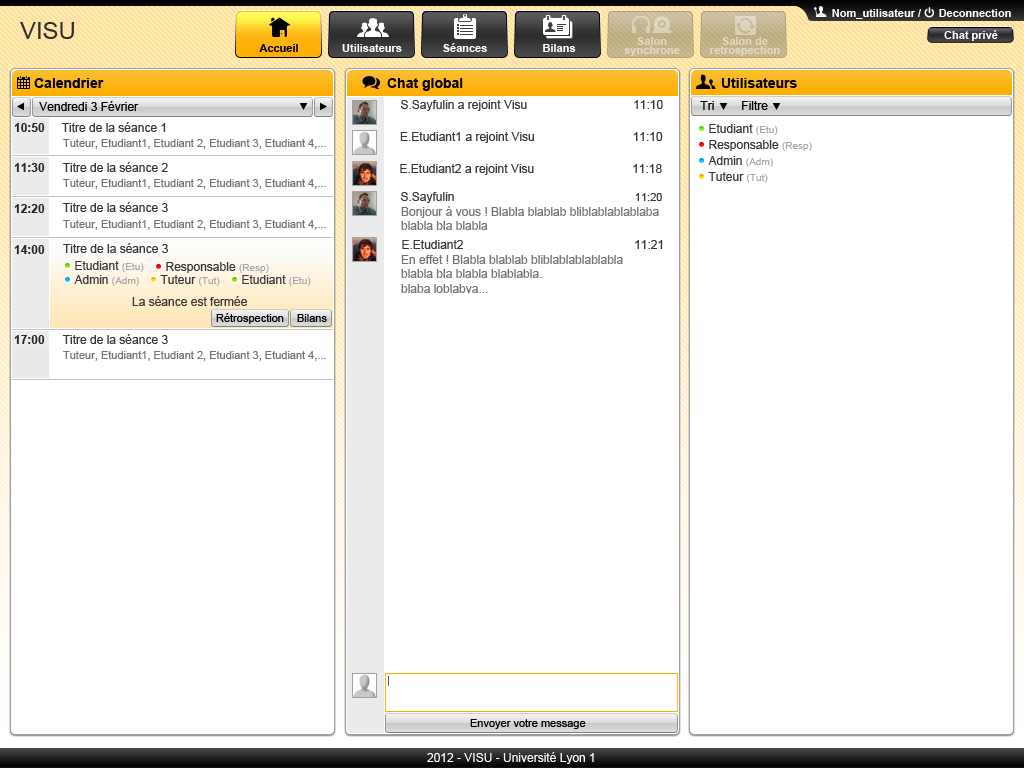
<style>
.page{position:relative;width:1024px;height:768px;background:#ffffff}
.page>*{position:absolute;margin:0}
.t1{font:11px "Arial-BoldMT";color:#ffffff}
.t2{font:24px "ArialMT";color:#2e2e2e}
.t3{font:11px/9px "Arial-BoldMT";color:#e3d8c2}
.t4{font:11px/9px "Arial-BoldMT";color:#e2d7c2}
.t5{font:11px "Arial-BoldMT";color:#010101}
.t6{font:14px "Arial-BoldMT";color:#000000}
.t7{font:12px "ArialMT";color:#000000}
.t8{font:12px "ArialMT";color:#373737}
.t9{font:12px "Arial-BoldMT";color:#272727}
.t10{font:12px "ArialMT";color:#363636}
.t11{font:10px "ArialMT";color:#a6a6a6}
.t12{font:11px "ArialMT";color:#737373}
.t13{font:11px "ArialMT";color:#373737}
.t14{font:12px "ArialMT";color:#737373}
.t15{font:11px "ArialMT";color:#000000}
.t16{font:12px "ArialMT";color:#fefefe}
</style>
<div class="page">
<p class="t1" style="left:832px;top:9px;width:89px;height:10px">Nom_utilisateur /</p>
<p class="t1" style="left:939px;top:9px;width:72px;height:8px">Deconnection</p>
<p class="t2" style="left:20px;top:22px;width:54px;height:17px">VISU</p>
<p class="t1" style="left:944px;top:30px;width:54px;height:11px">Chat privé</p>
<p class="t3" style="left:624px;top:37px;width:56px;height:19px;text-align:center">Salon<br>synchrone</p>
<p class="t4" style="left:710px;top:37px;width:70px;height:19px;text-align:center">Salon de<br>retrospection</p>
<p class="t5" style="left:259px;top:44px;width:39px;height:8px">Accueil</p>
<p class="t1" style="left:342px;top:44px;width:60px;height:8px">Utilisateurs</p>
<p class="t1" style="left:443px;top:43px;width:44px;height:9px">Séances</p>
<p class="t1" style="left:543px;top:44px;width:33px;height:8px">Bilans</p>
<p class="t6" style="left:34px;top:78px;width:70px;height:10px">Calendrier</p>
<p class="t6" style="left:387px;top:78px;width:76px;height:13px">Chat global</p>
<p class="t6" style="left:721px;top:78px;width:76px;height:10px">Utilisateurs</p>
<p class="t7" style="left:39px;top:101px;width:100px;height:10px">Vendredi 3 Février</p>
<p class="t8" style="left:401px;top:100px;width:262px;height:11px">S.Sayfulin a rejoint Visu          11:10</p>
<p class="t7" style="left:700px;top:101px;width:14px;height:9px">Tri</p>
<p class="t7" style="left:742px;top:101px;width:26px;height:9px">Filtre</p>
<p class="t9" style="left:14px;top:123px;width:31px;height:9px">10:50</p>
<p class="t10" style="left:61px;top:122px;width:105px;height:10px">Titre de la séance 1</p>
<p class="t8" style="left:709px;top:124px;width:69px;height:11px">Etudiant <span class="t11">(Etu)</span></p>
<p class="t8" style="left:400px;top:132px;width:263px;height:11px">E.Etudiant1 a rejoint Visu          11:10</p>
<p class="t12" style="left:63px;top:139px;width:263px;height:10px">Tuteur, Etudiant1, Etudiant 2, Etudiant 3, Etudiant 4,...</p>
<p class="t8" style="left:709px;top:140px;width:103px;height:11px">Responsable <span class="t11">(Resp)</span></p>
<p class="t8" style="left:708px;top:156px;width:65px;height:11px">Admin <span class="t11">(Adm)</span></p>
<p class="t9" style="left:14px;top:163px;width:31px;height:9px">11:30</p>
<p class="t8" style="left:62px;top:162px;width:106px;height:10px">Titre de la séance 2</p>
<p class="t8" style="left:400px;top:164px;width:262px;height:11px">E.Etudiant2 a rejoint Visu          11:18</p>
<p class="t8" style="left:708px;top:172px;width:60px;height:11px">Tuteur <span class="t11">(Tut)</span></p>
<p class="t12" style="left:63px;top:179px;width:263px;height:10px">Tuteur, Etudiant1, Etudiant 2, Etudiant 3, Etudiant 4,...</p>
<p class="t8" style="left:401px;top:192px;width:261px;height:11px">S.Sayfulin           <span class="t13">11:20</span></p>
<p class="t9" style="left:14px;top:204px;width:31px;height:9px">12:20</p>
<p class="t8" style="left:62px;top:202px;width:106px;height:10px">Titre de la séance 3</p>
<p class="t14" style="left:401px;top:206px;width:258px;height:24px">Bonjour à vous ! Blabla blablab bliblablablablaba<br>blabla bla blabla</p>
<p class="t12" style="left:63px;top:220px;width:263px;height:10px">Tuteur, Etudiant1, Etudiant 2, Etudiant 3, Etudiant 4,...</p>
<p class="t9" style="left:14px;top:245px;width:31px;height:9px">14:00</p>
<p class="t8" style="left:63px;top:243px;width:105px;height:10px">Titre de la séance 3</p>
<p class="t8" style="left:402px;top:240px;width:261px;height:9px">E.Etudiant2          11:21</p>
<p class="t14" style="left:401px;top:255px;width:222px;height:38px">En effet ! Blabla blablab bliblablablablabla<br>blabla bla blabla blablabla.<br>blaba loblabva...</p>
<p class="t8" style="left:75px;top:261px;width:69px;height:11px">Etudiant <span class="t11">(Etu)</span></p>
<p class="t8" style="left:166px;top:262px;width:103px;height:11px">Responsable <span class="t11">(Resp)</span></p>
<p class="t8" style="left:74px;top:275px;width:65px;height:11px">Admin <span class="t11">(Adm)</span></p>
<p class="t8" style="left:160px;top:275px;width:60px;height:11px">Tuteur <span class="t11">(Tut)</span></p>
<p class="t8" style="left:242px;top:275px;width:69px;height:11px">Etudiant <span class="t11">(Etu)</span></p>
<p class="t8" style="left:132px;top:296px;width:115px;height:10px">La séance est fermée</p>
<p class="t15" style="left:216px;top:313px;width:68px;height:11px">Rétrospection</p>
<p class="t15" style="left:297px;top:314px;width:30px;height:8px">Bilans</p>
<p class="t9" style="left:14px;top:335px;width:31px;height:9px">17:00</p>
<p class="t8" style="left:62px;top:334px;width:106px;height:10px">Titre de la séance 3</p>
<p class="t12" style="left:63px;top:351px;width:263px;height:10px">Tuteur, Etudiant1, Etudiant 2, Etudiant 3, Etudiant 4,...</p>
<p class="t15" style="left:470px;top:719px;width:116px;height:10px">Envoyer votre message</p>
<p class="t16" style="left:427px;top:752px;width:167px;height:12px">2012 - VISU - Université Lyon 1</p>
</div>
